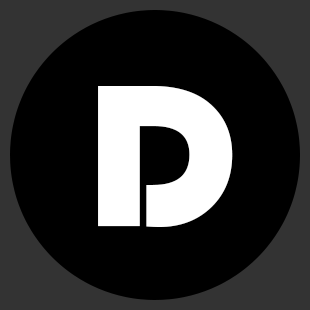
<style>
.page{position:relative;width:310px;height:310px;background:#000000}
.page>*{position:absolute;margin:0}
.t1{font:210px "Bauhaus93";color:#ffffff}
</style>
<div class="page">
<p class="t1" style="left:98px;top:86px;width:135px;height:141px">D</p>
</div>
